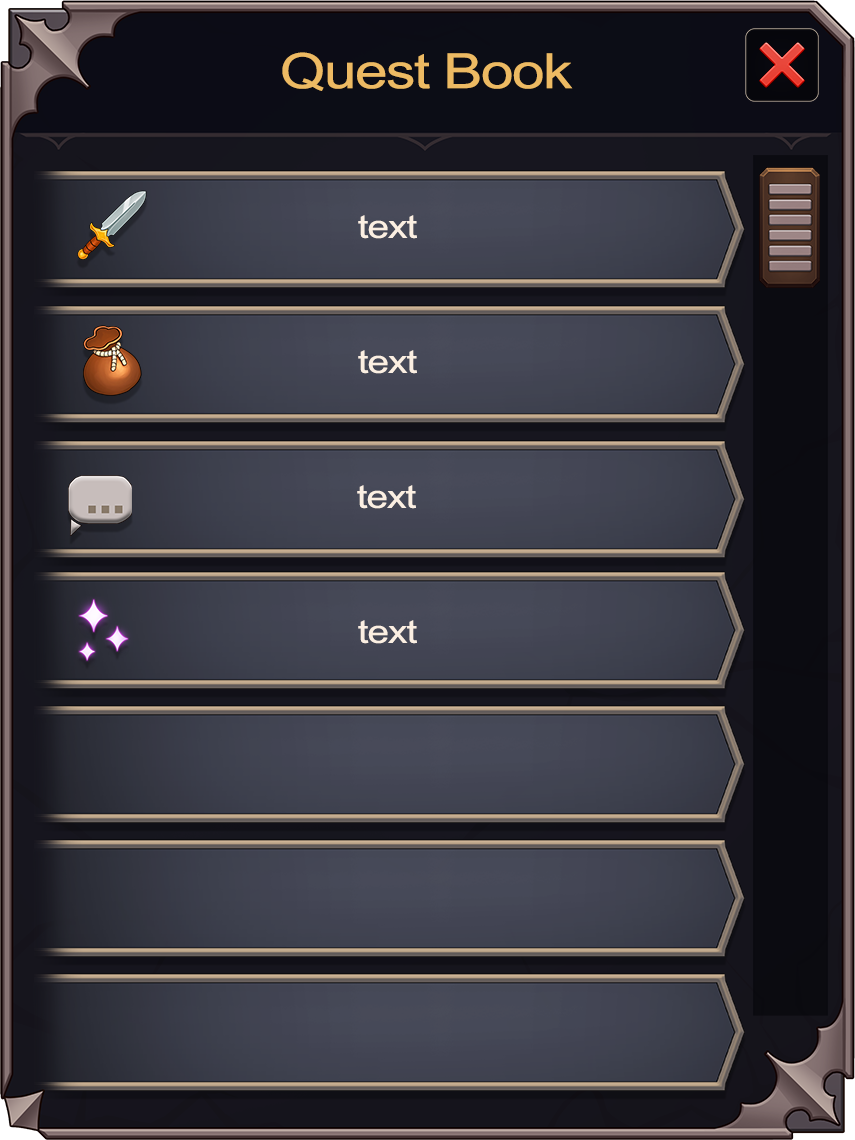
<style>
.page{position:relative;width:855px;height:1140px}
.page>*{position:absolute;margin:0}
.t1{font:48.7px "ArialMT";letter-spacing:-0.025em;color:#edba63;scale:1.2 1}
.t2{font:32.3px "ArialMT";letter-spacing:-0.025em;color:#fbefe2;scale:1.2 1}
</style>
<div class="page">
<p class="t1" style="left:282px;top:52px;width:291px;height:39px">Quest Book</p>
<p class="t2" style="left:358px;top:215px;width:59px;height:24px">text</p>
<p class="t2" style="left:358px;top:350px;width:59px;height:24px">text</p>
<p class="t2" style="left:357px;top:485px;width:59px;height:24px">text</p>
<p class="t2" style="left:358px;top:620px;width:59px;height:24px">text</p>
</div>
